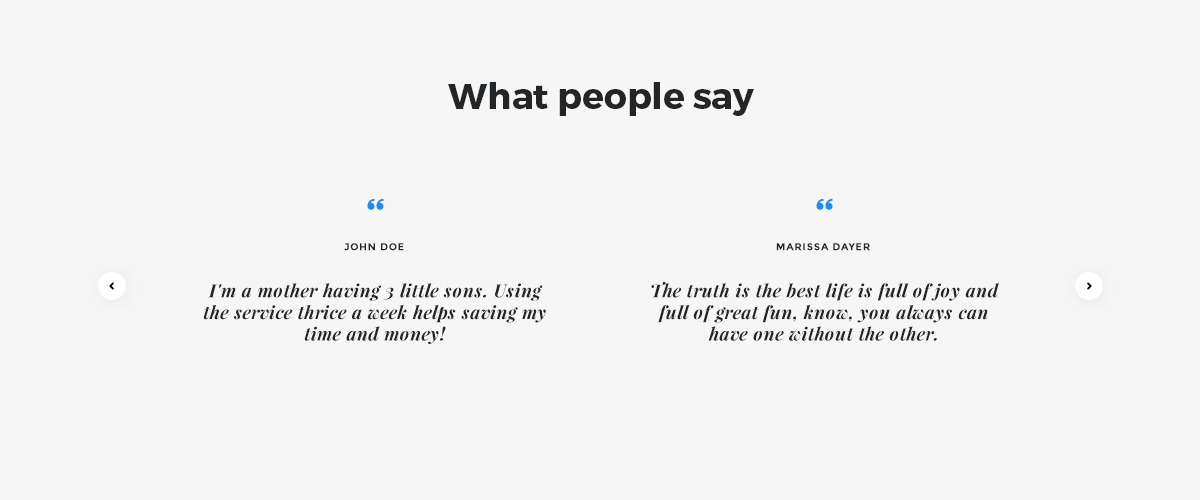
<style>
.page{position:relative;width:1200px;height:500px;background:#f6f6f6}
.page>*{position:absolute;margin:0}
.t1{font:36px "Montserrat-Bold";color:#242526}
.t2{font:10px "Montserrat-Bold";letter-spacing:0.08em;color:#242526;text-transform:uppercase}
.t3{font:18px "PlayfairDisplay-BoldItalic";letter-spacing:0.025em;color:#242526}
</style>
<div class="page">
<p class="t1" style="left:448px;top:82px;width:306px;height:34px">What people say</p>
<p class="t2" style="left:344px;top:243px;width:60px;height:8px">John DOe</p>
<p class="t2" style="left:776px;top:243px;width:94px;height:8px">Marissa Dayer</p>
<p class="t3" style="left:651px;top:281px;width:348px;height:60px;text-align:center">The truth is the best life is full of joy and full of great fun, know, you always can have one without the other.</p>
<p class="t3" style="left:203px;top:283px;width:343px;height:61px;text-align:center">I'm a mother having 3 little sons. Using the service thrice a week helps saving my time and money!</p>
</div>
